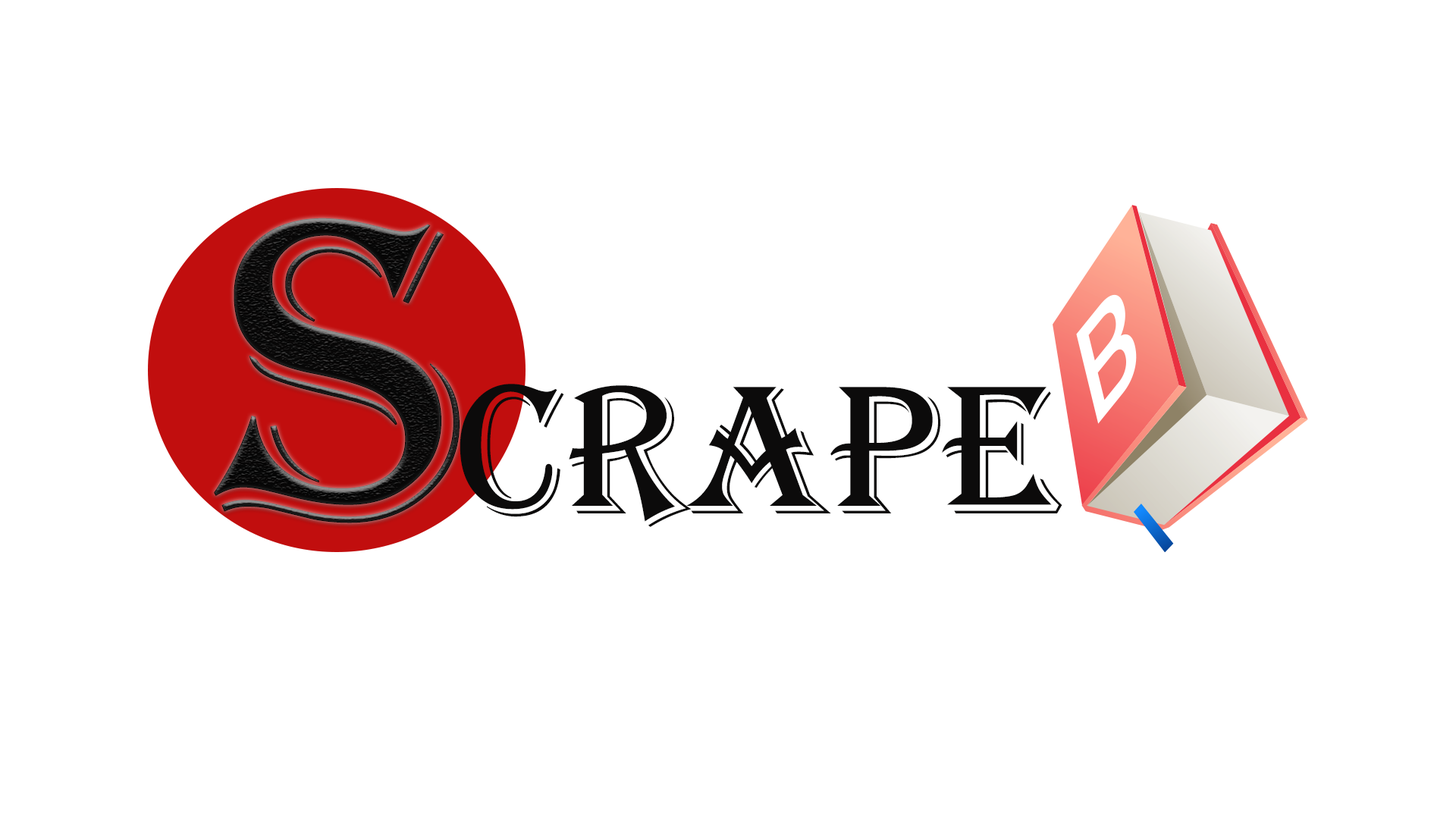
<style>
.page{position:relative;width:1456px;height:819px;background:#ffffff}
.page>*{position:absolute;margin:0}
.t1{font:442.4px "Algerian";color:#0c0b0b}
.t2{font:189.6px "Algerian";color:#0c0b0b}
</style>
<div class="page">
<p class="t1" style="left:214px;top:218px;width:246px;height:305px">s</p>
<p class="t2" style="left:460px;top:384px;width:602px;height:143px">crape</p>
</div>
